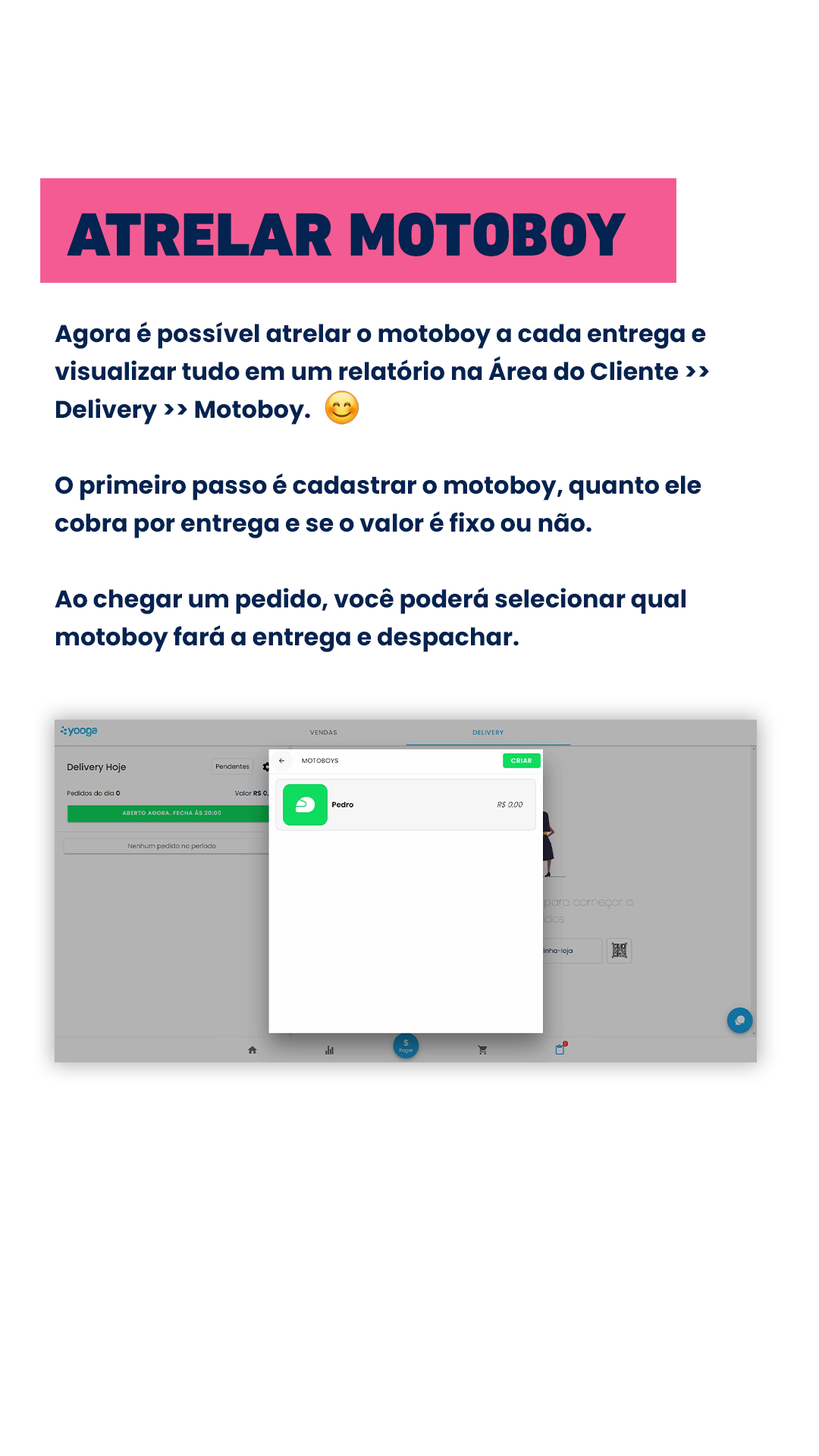
<style>
.page{position:relative;width:819px;height:1456px;background:#ffffff}
.page>*{position:absolute;margin:0}
.t1{font:62.1px "DINNextLTPro-Black";color:#032351;text-transform:uppercase}
.t2{font:24.3px/37.9px "Poppins-Bold";color:#032351}
</style>
<div class="page">
<p class="t1" style="left:67px;top:212px;width:559px;height:44px">ATRELAR MOTOBOY</p>
<p class="t2" style="left:55px;top:322px;width:654px;height:330px">Agora é possível atrelar o motoboy a cada entrega e visualizar tudo em um relatório na Área do Cliente &gt;&gt; Delivery &gt;&gt; Motoboy.<br><br>O primeiro passo é cadastrar o motoboy, quanto ele cobra por entrega e se o valor é fixo ou não.<br><br>Ao chegar um pedido, você poderá selecionar qual motoboy fará a entrega e despachar.</p>
</div>
